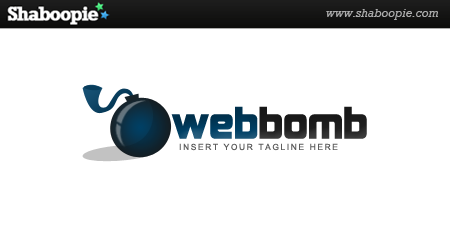
<style>
.page{position:relative;width:450px;height:250px;background:#ffffff}
.page>*{position:absolute;margin:0}
.t1{font:41.7px "Kimberley";color:#1f1f1f}
.t2{font:41.7px "Kimberley";color:#004065}
.t3{font:8.3px "ArialMT";letter-spacing:0.2em;color:#5d5d5d}
</style>
<div class="page">
<p class="t1" style="left:171px;top:106px;width:196px;height:33px"><span class="t2">web</span>bomb</p>
<p class="t3" style="left:179px;top:143px;width:159px;height:8px">INSERT YOUR TAGLINE HERE</p>
</div>
